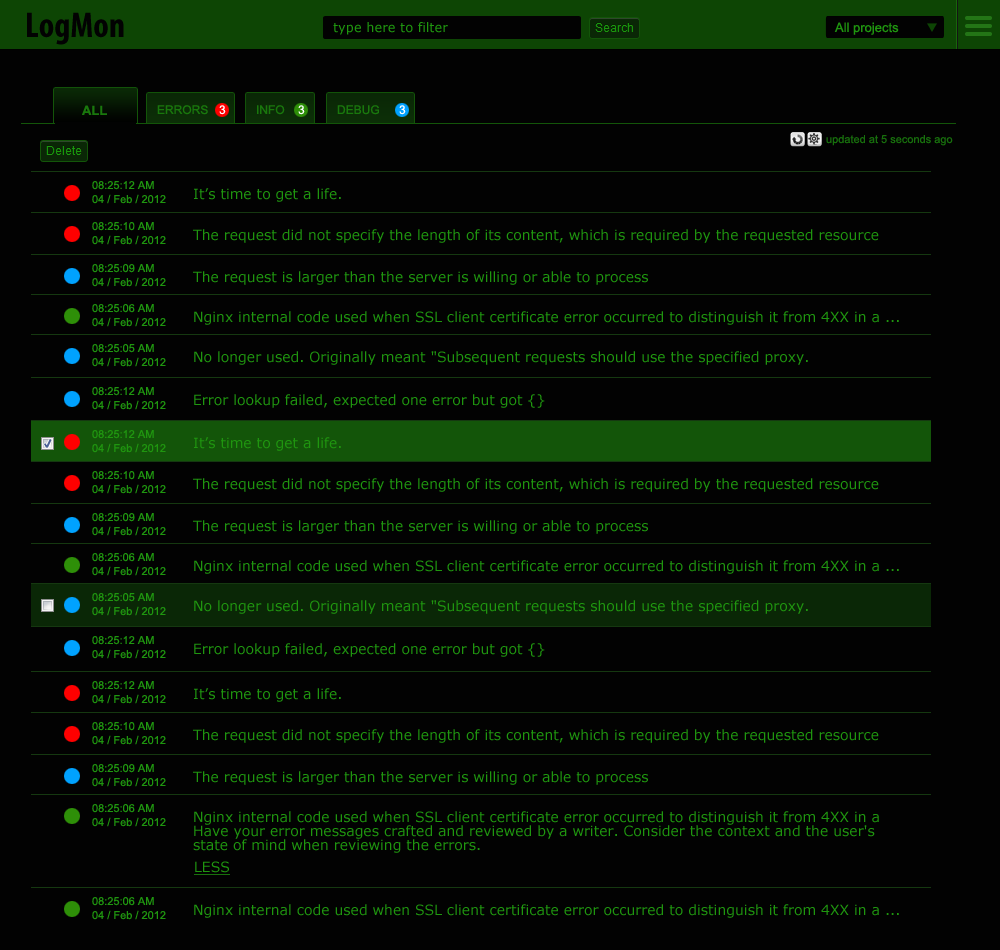
<style>
.page{position:relative;width:1000px;height:950px;background:#020202}
.page>*{position:absolute;margin:0}
.t1{font:36px "MyriadPro-BoldCond";color:#020202}
.t2{font:13px "Verdana";color:#1f960f}
.t3{font:13px "ArialMT";color:#1f960f}
.t4{font:13px "Arial-BoldMT";color:#19780c}
.t5{font:12px "ArialMT";color:#19780c}
.t6{font:12px "ArialMT";color:#ffffff}
.t7{font:11px "ArialMT";color:#176f0c}
.t8{font:11px/14px "ArialMT";color:#1f960f}
.t9{font:14px "Verdana";color:#1f960f}
.t10{font:14px/14px "Verdana";color:#1f960f}
.t11{font:14px "Verdana";color:#1f960f;text-decoration:underline}
</style>
<div class="page">
<p class="t1" style="left:27px;top:12px;width:97px;height:33px">LogMon</p>
<p class="t2" style="left:333px;top:22px;width:115px;height:13px">type here to filter</p>
<p class="t3" style="left:834px;top:22px;width:65px;height:13px">All projects</p>
<p class="t4" style="left:82px;top:105px;width:25px;height:10px">ALL</p>
<p class="t5" style="left:157px;top:105px;width:51px;height:10px">ERRORS</p>
<p class="t6" style="left:219px;top:105px;width:7px;height:10px">3</p>
<p class="t5" style="left:257px;top:105px;width:28px;height:10px">INFO</p>
<p class="t6" style="left:298px;top:105px;width:7px;height:10px">3</p>
<p class="t5" style="left:337px;top:105px;width:42px;height:10px">DEBUG</p>
<p class="t6" style="left:399px;top:105px;width:7px;height:10px">3</p>
<p class="t7" style="left:826px;top:135px;width:127px;height:11px">updated at 5 seconds ago</p>
<p class="t8" style="left:92px;top:181px;width:74px;height:23px">08:25:12 AM<br>04 / Feb / 2012</p>
<p class="t9" style="left:194px;top:188px;width:147px;height:14px">It’s time to get a life.</p>
<p class="t8" style="left:92px;top:222px;width:74px;height:23px">08:25:10 AM<br>04 / Feb / 2012</p>
<p class="t9" style="left:193px;top:229px;width:686px;height:14px">The request did not specify the length of its content, which is required by the requested resource</p>
<p class="t8" style="left:92px;top:264px;width:74px;height:23px">08:25:09 AM<br>04 / Feb / 2012</p>
<p class="t9" style="left:193px;top:271px;width:455px;height:14px">The request is larger than the server is willing or able to process</p>
<p class="t8" style="left:92px;top:304px;width:74px;height:23px">08:25:06 AM<br>04 / Feb / 2012</p>
<p class="t9" style="left:194px;top:311px;width:705px;height:14px">Nginx internal code used when SSL client certificate error occurred to distinguish it from 4XX in a ...</p>
<p class="t8" style="left:92px;top:344px;width:74px;height:23px">08:25:05 AM<br>04 / Feb / 2012</p>
<p class="t9" style="left:194px;top:351px;width:614px;height:14px">No longer used. Originally meant "Subsequent requests should use the specified proxy.</p>
<p class="t8" style="left:92px;top:387px;width:74px;height:23px">08:25:12 AM<br>04 / Feb / 2012</p>
<p class="t9" style="left:194px;top:394px;width:351px;height:14px">Error lookup failed, expected one error but got {}</p>
<p class="t8" style="left:92px;top:430px;width:74px;height:23px">08:25:12 AM<br>04 / Feb / 2012</p>
<p class="t9" style="left:194px;top:437px;width:147px;height:14px">It’s time to get a life.</p>
<p class="t8" style="left:92px;top:471px;width:74px;height:23px">08:25:10 AM<br>04 / Feb / 2012</p>
<p class="t9" style="left:193px;top:478px;width:686px;height:14px">The request did not specify the length of its content, which is required by the requested resource</p>
<p class="t8" style="left:92px;top:513px;width:74px;height:23px">08:25:09 AM<br>04 / Feb / 2012</p>
<p class="t9" style="left:193px;top:520px;width:455px;height:14px">The request is larger than the server is willing or able to process</p>
<p class="t8" style="left:92px;top:553px;width:74px;height:23px">08:25:06 AM<br>04 / Feb / 2012</p>
<p class="t9" style="left:194px;top:560px;width:705px;height:14px">Nginx internal code used when SSL client certificate error occurred to distinguish it from 4XX in a ...</p>
<p class="t8" style="left:92px;top:593px;width:74px;height:23px">08:25:05 AM<br>04 / Feb / 2012</p>
<p class="t9" style="left:194px;top:600px;width:614px;height:14px">No longer used. Originally meant "Subsequent requests should use the specified proxy.</p>
<p class="t8" style="left:92px;top:636px;width:74px;height:23px">08:25:12 AM<br>04 / Feb / 2012</p>
<p class="t9" style="left:194px;top:643px;width:351px;height:14px">Error lookup failed, expected one error but got {}</p>
<p class="t8" style="left:92px;top:681px;width:74px;height:23px">08:25:12 AM<br>04 / Feb / 2012</p>
<p class="t9" style="left:194px;top:688px;width:147px;height:14px">It’s time to get a life.</p>
<p class="t8" style="left:92px;top:722px;width:74px;height:23px">08:25:10 AM<br>04 / Feb / 2012</p>
<p class="t9" style="left:193px;top:729px;width:686px;height:14px">The request did not specify the length of its content, which is required by the requested resource</p>
<p class="t8" style="left:92px;top:764px;width:74px;height:23px">08:25:09 AM<br>04 / Feb / 2012</p>
<p class="t9" style="left:193px;top:771px;width:455px;height:14px">The request is larger than the server is willing or able to process</p>
<p class="t8" style="left:92px;top:804px;width:74px;height:23px">08:25:06 AM<br>04 / Feb / 2012</p>
<p class="t10" style="left:193px;top:811px;width:686px;height:42px">Nginx internal code used when SSL client certificate error occurred to distinguish it from 4XX in a <br>Have your error messages crafted and reviewed by a writer. Consider the context and the user's <br>state of mind when reviewing the errors.</p>
<p class="t11" style="left:194px;top:861px;width:36px;height:14px">LESS</p>
<p class="t8" style="left:92px;top:897px;width:74px;height:23px">08:25:06 AM<br>04 / Feb / 2012</p>
<p class="t9" style="left:194px;top:904px;width:705px;height:14px">Nginx internal code used when SSL client certificate error occurred to distinguish it from 4XX in a ...</p>
</div>
